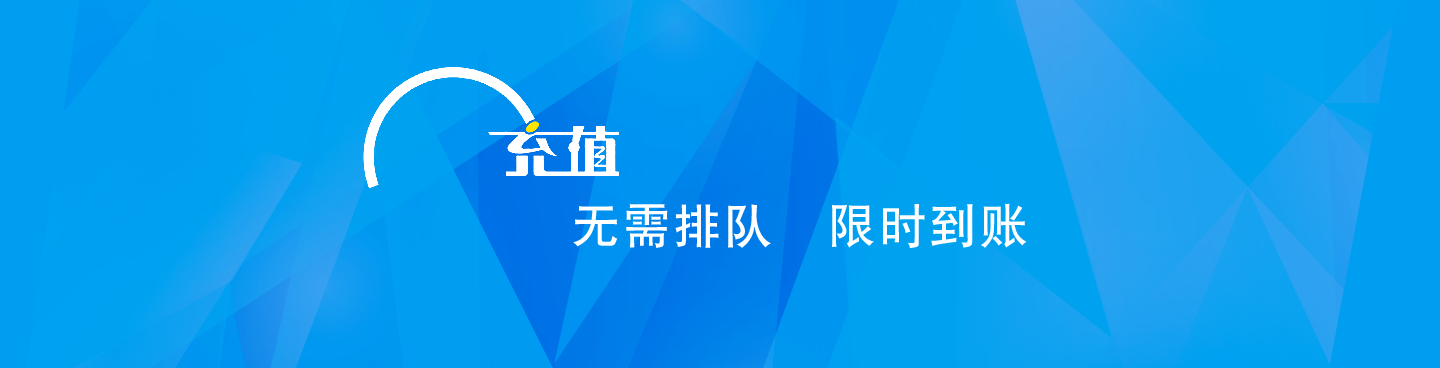
<style>
.page{position:relative;width:1440px;height:368px}
.page>*{position:absolute;margin:0}
.t1{font:48px "By-JOSSQ-DMF-in-BeiJing";letter-spacing:0.055em;color:#ffffff}
</style>
<div class="page">
<p class="t1" style="left:573px;top:203px;width:454px;height:45px">无需排队  限时到账</p>
</div>
